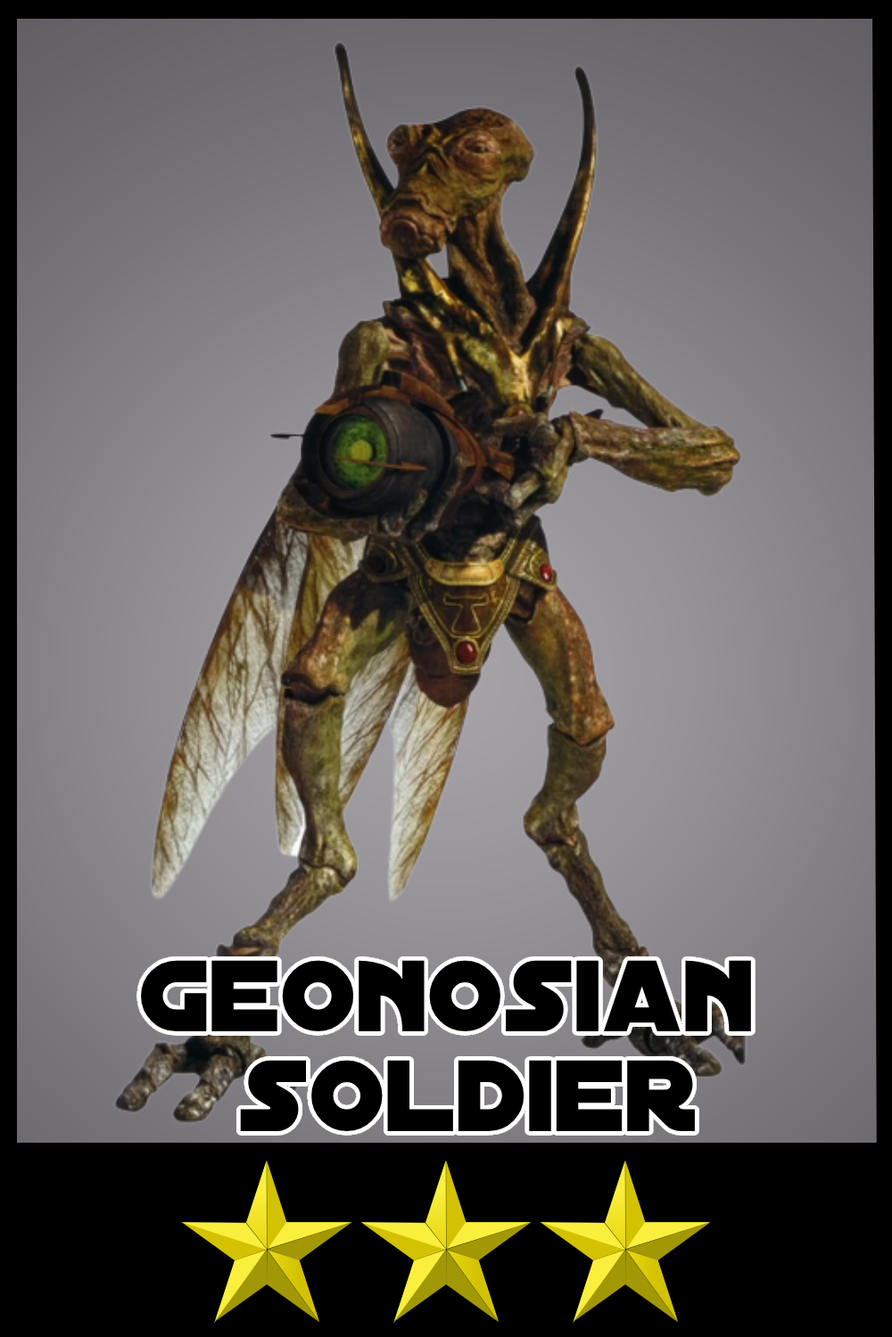
<style>
.page{position:relative;width:892px;height:1337px}
.page>*{position:absolute;margin:0}
.t1{font:108.9px/99.8px "DistantGalaxy";color:#000000}
</style>
<div class="page">
<p class="t1" style="left:141px;top:960px;width:610px;height:171px;text-align:center">geonosian <br>soldier</p>
</div>
